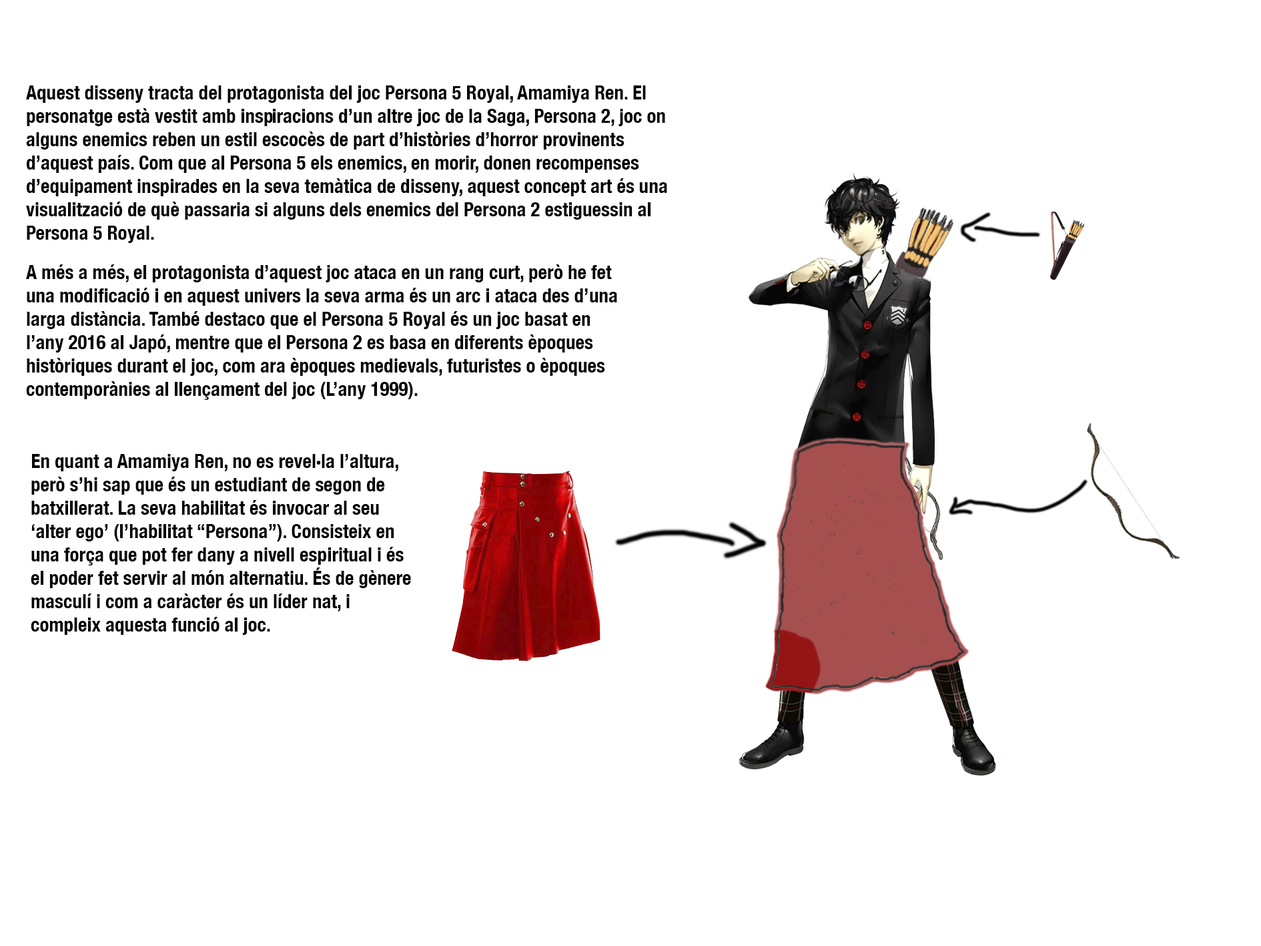
<style>
.page{position:relative;width:1261px;height:946px;background:#ffffff}
.page>*{position:absolute;margin:0}
.t1{font:19.5px "HelveticaNeue-CondensedBold";color:#000000}
.t2{font:19.7px "HelveticaNeue-CondensedBold";color:#000000}
</style>
<div class="page">
<p class="t1" style="left:26px;top:85px;width:641px;height:158px">Aquest disseny tracta del protagonista del joc Persona 5 Royal, Amamiya Ren. El personatge està vestit amb inspiracions d’un altre joc de la Saga, Persona 2, joc on alguns enemics reben un estil escocès de part d’històries d’horror provinents d’aquest país. Com que al Persona 5 els enemics, en morir, donen recompenses d’equipament inspirades en la seva temàtica de disseny, aquest concept art és una visualització de què passaria si alguns dels enemics del Persona 2 estiguessin al Persona 5 Royal.<br><span class="t2"></span></p>
<p class="t1" style="left:26px;top:264px;width:591px;height:136px">A més a més, el protagonista d’aquest joc ataca en un rang curt, però he fet una modificació i en aquest univers la seva arma és un arc i ataca des d’una larga distància. També destaco que el Persona 5 Royal és un joc basat en l’any 2016 al Japó, mentre que el Persona 2 es basa en diferents èpoques històriques durant el joc, com ara èpoques medievals, futuristes o èpoques contemporànies al llençament del joc (L’any 1999).</p>
<p class="t1" style="left:31px;top:454px;width:380px;height:181px">En quant a Amamiya Ren, no es revel·la l’altura, però s’hi sap que és un estudiant de segon de batxillerat. La seva habilitat és invocar al seu ‘alter ego’ (l’habilitat “Persona”). Consisteix en una força que pot fer dany a nivell espiritual i és el poder fet servir al món alternatiu. És de gènere masculí i com a caràcter és un líder nat, i compleix aquesta funció al joc.</p>
</div>
